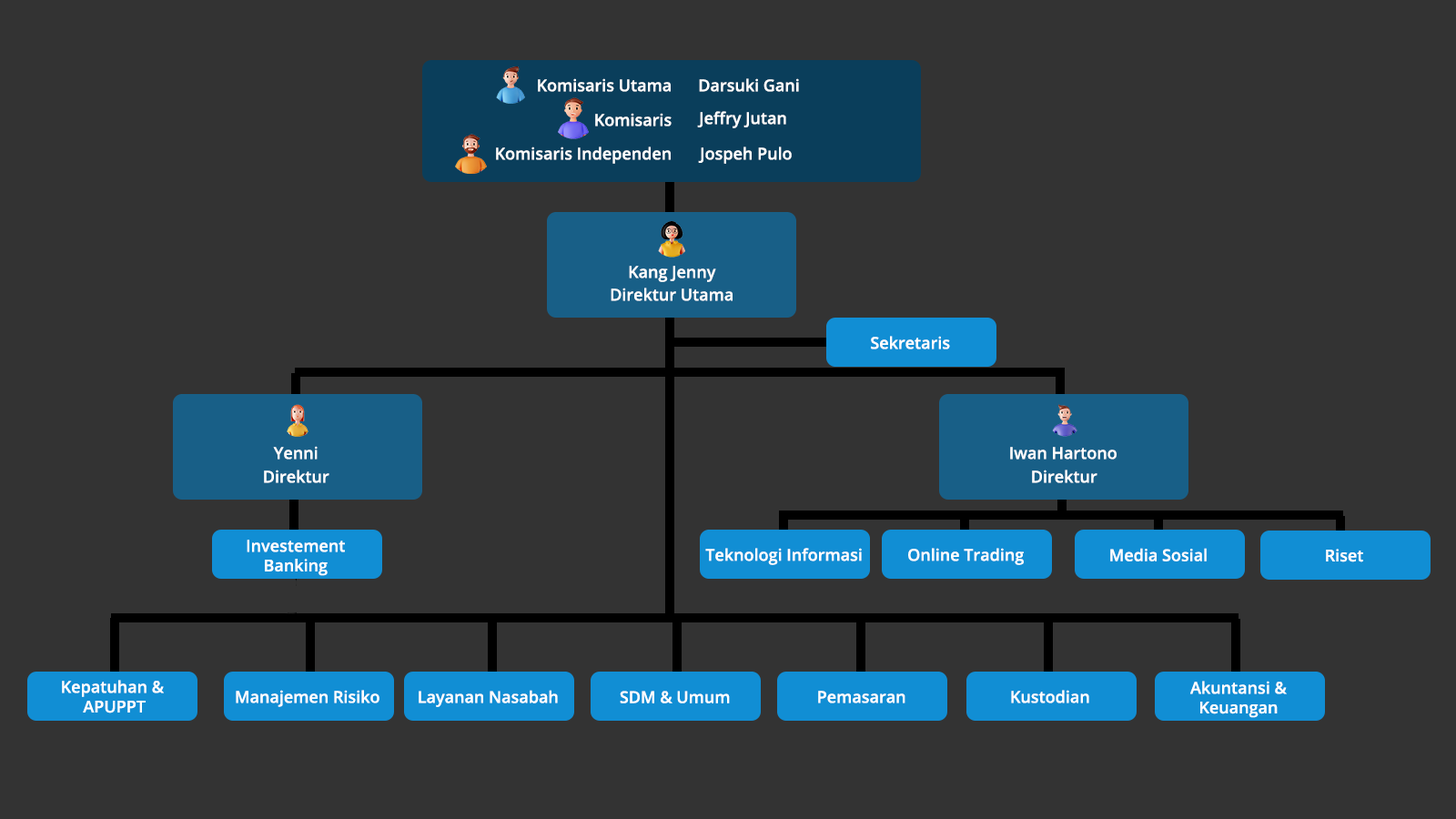
<style>
.page{position:relative;width:1456px;height:819px;background:#333333}
.page>*{position:absolute;margin:0}
.t1{font:16.4px "OpenSans-Semibold";color:#ffffff}
</style>
<div class="page">
<p class="t1" style="left:538px;top:78px;width:133px;height:14px">Komisaris Utama</p>
<p class="t1" style="left:699px;top:78px;width:100px;height:14px">Darsuki Gani</p>
<p class="t1" style="left:595px;top:113px;width:77px;height:13px">Komisaris</p>
<p class="t1" style="left:697px;top:111px;width:89px;height:17px">Jeffry Jutan</p>
<p class="t1" style="left:496px;top:147px;width:175px;height:17px">Komisaris Independen</p>
<p class="t1" style="left:698px;top:147px;width:94px;height:17px">Jospeh Pulo</p>
<p class="t1" style="left:629px;top:266px;width:87px;height:16px">Kang Jenny</p>
<p class="t1" style="left:611px;top:288px;width:122px;height:13px">Direktur Utama</p>
<p class="t1" style="left:871px;top:336px;width:79px;height:13px">Sekretaris</p>
<p class="t1" style="left:273px;top:446px;width:45px;height:14px">Yenni</p>
<p class="t1" style="left:1010px;top:447px;width:107px;height:13px">Iwan Hartono</p>
<p class="t1" style="left:264px;top:470px;width:65px;height:13px">Direktur</p>
<p class="t1" style="left:1032px;top:470px;width:65px;height:13px">Direktur</p>
<p class="t1" style="left:247px;top:540px;width:98px;height:36px;text-align:center">Investement<br>Banking</p>
<p class="t1" style="left:705px;top:548px;width:157px;height:17px">Teknologi Informasi</p>
<p class="t1" style="left:908px;top:548px;width:116px;height:17px">Online Trading</p>
<p class="t1" style="left:1110px;top:548px;width:97px;height:13px">Media Sosial</p>
<p class="t1" style="left:1326px;top:549px;width:37px;height:13px">Riset</p>
<p class="t1" style="left:62px;top:680px;width:102px;height:33px;text-align:center">Kepatuhan &amp; <br>APUPPT</p>
<p class="t1" style="left:236px;top:690px;width:143px;height:17px">Manajemen Risiko</p>
<p class="t1" style="left:419px;top:690px;width:139px;height:17px">Layanan Nasabah</p>
<p class="t1" style="left:1011px;top:690px;width:78px;height:13px">Kustodian</p>
<p class="t1" style="left:1190px;top:681px;width:97px;height:37px;text-align:center">Akuntansi &amp;<br>Keuangan</p>
<p class="t1" style="left:620px;top:691px;width:110px;height:12px">SDM &amp; Umum</p>
<p class="t1" style="left:818px;top:691px;width:87px;height:12px">Pemasaran</p>
</div>
